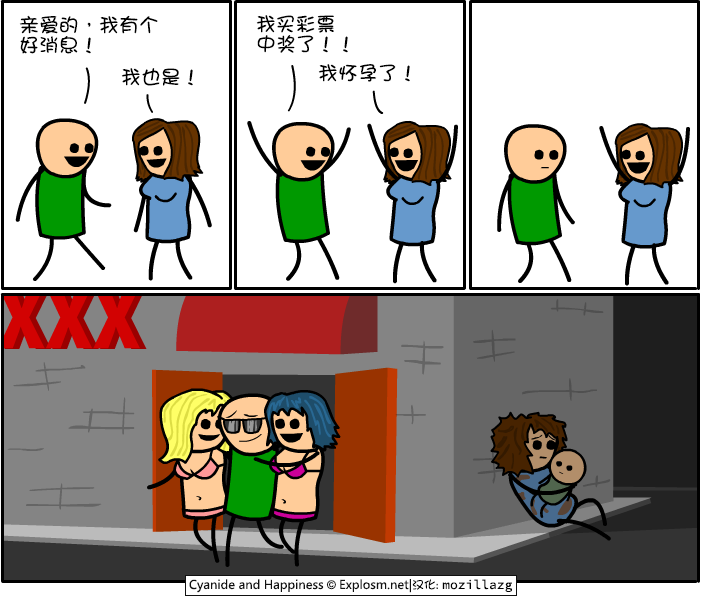
<style>
.page{position:relative;width:701px;height:597px;background:#ffffff}
.page>*{position:absolute;margin:0}
.t1{font:20px/20px "DFGirl";color:#000000}
.t2{font:20px "DFGirl";color:#000000}
</style>
<div class="page">
<p class="t1" style="left:19px;top:15px;width:139px;height:39px">亲爱的，我有个<br>好消息！</p>
<p class="t1" style="left:256px;top:15px;width:92px;height:38px">我买彩票<br>中奖了！！</p>
<p class="t2" style="left:318px;top:64px;width:92px;height:18px">我怀孕了！</p>
<p class="t2" style="left:121px;top:68px;width:72px;height:18px">我也是！</p>
</div>
